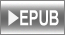
<style>
.page{position:relative;width:65px;height:35px}
.page>*{position:absolute;margin:0}
.t1{font:20.7px "Arial-BoldMT";color:#ffffff;text-transform:uppercase;scale:0.7 1}
</style>
<div class="page">
<p class="t1" style="left:20px;top:10px;width:39px;height:16px">EPUB</p>
</div>
